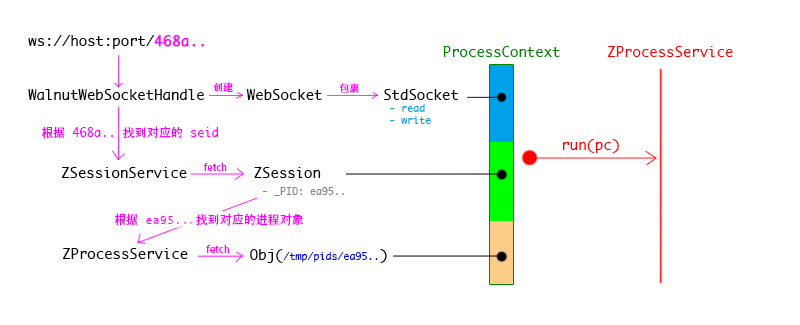
<style>
.page{position:relative;width:800px;height:325px;background:#ffffff}
.page>*{position:absolute;margin:0}
.t1{font:14px "Monaco";color:#000000}
.t2{font:14px "Monaco";color:#ff00ff;font-weight:bold}
.t3{font:14px "Monaco";color:#008800}
.t4{font:14px "Monaco";color:#ff0000}
.t5{font:10px "AdobeHeitiStd-Regular";color:#ff00ff}
.t6{font:10px "Monaco";color:#00a0e9}
.t7{font:12px "Monaco";color:#ff00ff}
.t8{font:12px "AdobeHeitiStd-Regular";color:#ff00ff}
.t9{font:10px "Monaco";color:#898989}
.t10{font:12px "AndaleMono";color:#ff00ff}
.t11{font:10px "Monaco";color:#0000ff}
</style>
<div class="page">
<p class="t1" style="left:28px;top:35px;width:176px;height:14px">ws://host:port/<span class="t2">468a..</span></p>
<p class="t3" style="left:443px;top:46px;width:117px;height:11px">ProcessContext</p>
<p class="t4" style="left:608px;top:46px;width:125px;height:11px">ZProcessService</p>
<p class="t1" style="left:28px;top:89px;width:176px;height:11px">WalnutWebSocketHandle</p>
<p class="t5" style="left:213px;top:82px;width:20px;height:10px">创建</p>
<p class="t1" style="left:246px;top:89px;width:76px;height:11px">WebSocket</p>
<p class="t5" style="left:339px;top:83px;width:20px;height:10px">包裹</p>
<p class="t6" style="left:384px;top:89px;width:75px;height:35px"><span class="t1">StdSocket<br></span> - read<br> - write</p>
<p class="t7" style="left:41px;top:126px;width:177px;height:13px"><span class="t8">根据</span> 468a.. <span class="t8">找到对应的</span> seid</p>
<p class="t4" style="left:563px;top:139px;width:56px;height:14px">run(pc)</p>
<p class="t1" style="left:62px;top:167px;width:125px;height:11px">ZSessionService</p>
<p class="t5" style="left:203px;top:162px;width:24px;height:9px">fetch</p>
<p class="t9" style="left:254px;top:167px;width:90px;height:29px"><span class="t1">ZSession<br> </span>- _PID: ea95..</p>
<p class="t8" style="left:114px;top:213px;width:190px;height:13px">根据<span class="t10"> ea95.. </span>找到对应的进程对象</p>
<p class="t5" style="left:206px;top:244px;width:23px;height:9px">fetch</p>
<p class="t1" style="left:63px;top:248px;width:125px;height:11px">ZProcessService</p>
<p class="t11" style="left:250px;top:249px;width:137px;height:14px"><span class="t1">Obj(</span>/tmp/pids/ea95..<span class="t1">)</span></p>
</div>
